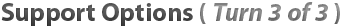
<style>
.page{position:relative;width:345px;height:28px;background:#ffffff}
.page>*{position:absolute;margin:0}
.t1{font:26px "MyriadPro-Bold";color:#464646}
.t2{font:26px "MyriadPro-Bold";color:#898989}
.t3{font:26px "MyriadPro-BoldIt";color:#898989}
</style>
<div class="page">
<p class="t1" style="left:1px;top:2px;width:339px;height:24px">Support Options <span class="t2">( </span><span class="t3">Turn 3 of 3 </span><span class="t2">)</span></p>
</div>
